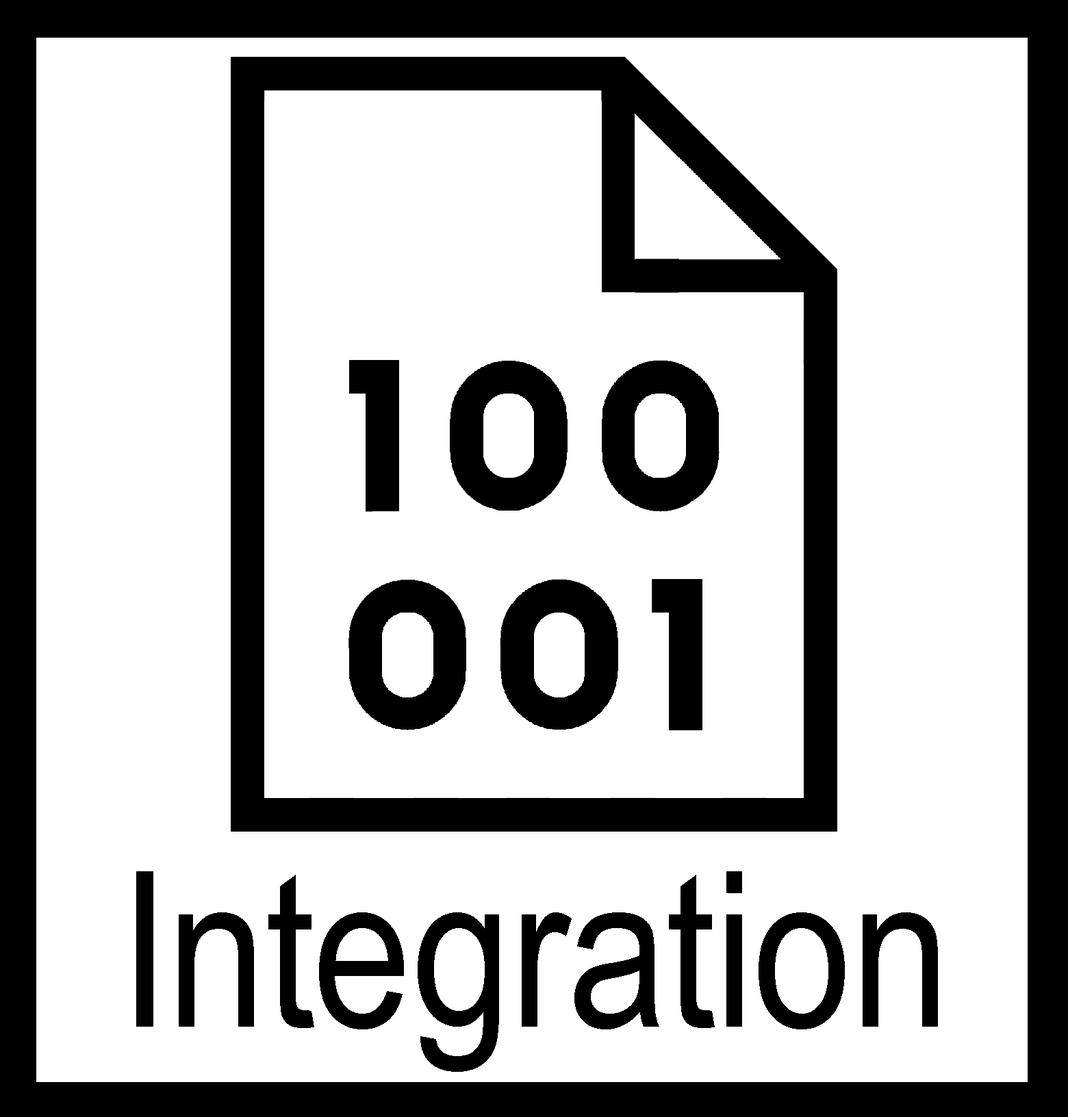
<style>
.page{position:relative;width:1068px;height:1117px;background:#ffffff}
.page>*{position:absolute;margin:0}
.t1{font:217.3px "ArialNarrow";letter-spacing:-0.005em;color:#000000}
</style>
<div class="page">
<p class="t1" style="left:136px;top:871px;width:802px;height:201px">Integration</p>
</div>
